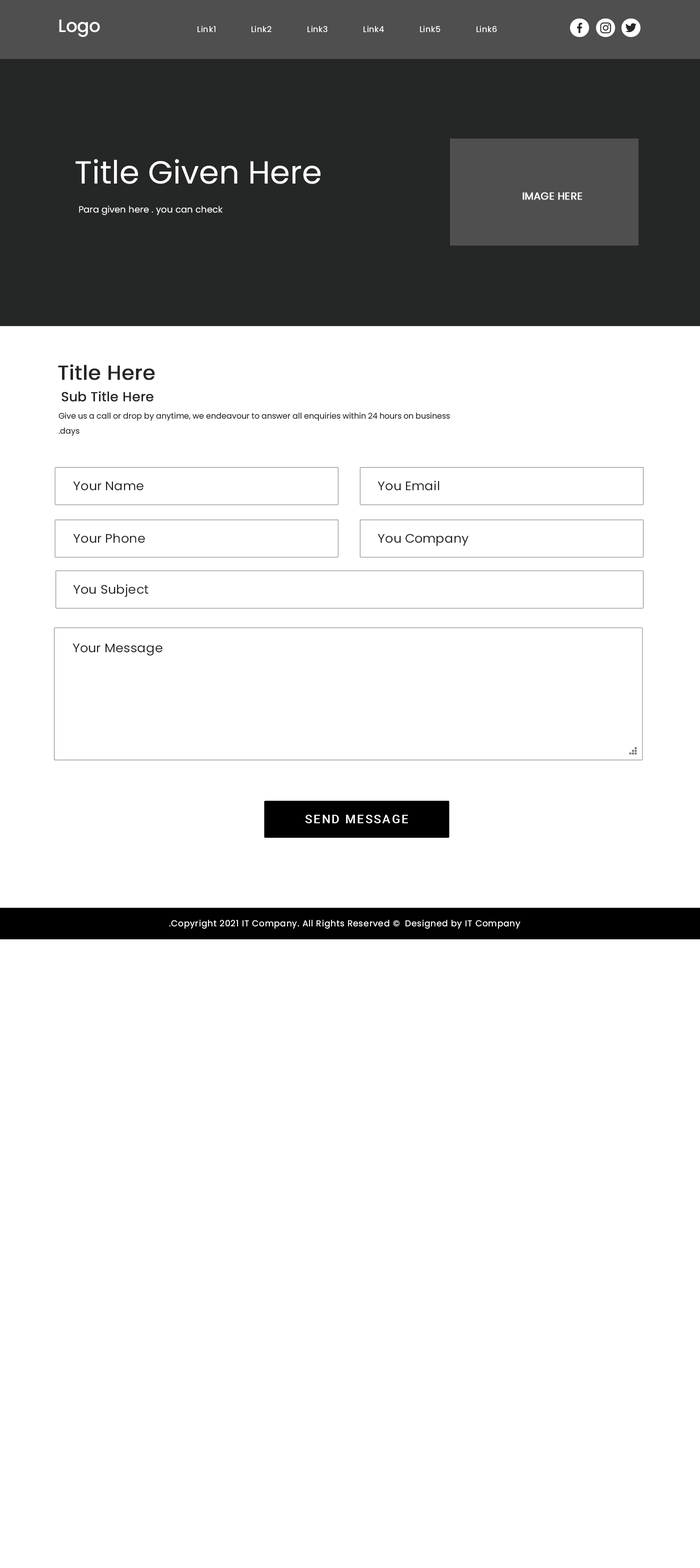
<style>
.page{position:relative;width:700px;height:1568px;background:#ffffff}
.page>*{position:absolute;margin:0}
.t1{font:18px "Poppins-Medium";color:#ffffff}
.t2{font:8px "Poppins-Regular";letter-spacing:0.06em;color:#ffffff}
.t3{font:32px "Poppins-Regular";color:#ffffff}
.t4{font:10.2px "Poppins-Regular";color:#ffffff;font-weight:bold}
.t5{font:9px "Poppins-Regular";color:#ffffff}
.t6{font:20px "Poppins-Regular";color:#252726;font-weight:bold}
.t7{font:13px "Poppins-Regular";color:#252726;font-weight:bold}
.t8{font:8px/15px "Poppins-Regular";color:#252726}
.t9{font:12.3px "Poppins-Regular";color:#222222;scale:1.04 1}
.t10{font:11.9px "Roboto-Medium";letter-spacing:0.1em;color:#ffffff;text-transform:uppercase}
.t11{font:8.5px "Poppins-Regular";letter-spacing:0.05em;color:#ffffff}
</style>
<div class="page">
<p class="t1" style="left:59px;top:20px;width:41px;height:17px">Logo</p>
<p class="t2" style="left:198px;top:26px;width:299px;height:7px">Link1             Link2             Link3             Link4             Link5             Link6</p>
<p class="t3" style="left:76px;top:159px;width:245px;height:25px">Title Given Here</p>
<p class="t4" style="left:523px;top:192px;width:59px;height:8px">IMAGE HERE</p>
<p class="t5" style="left:79px;top:206px;width:144px;height:9px">Para given here . you can check</p>
<p class="t6" style="left:58px;top:364px;width:97px;height:16px">Title Here</p>
<p class="t7" style="left:62px;top:391px;width:92px;height:11px">Sub Title Here</p>
<p class="t8" style="left:59px;top:412px;width:391px;height:24px;text-align:right">Give us a call or drop by anytime, we endeavour to answer all enquiries within 24 hours on business days.</p>
<p class="t9" style="left:73px;top:481px;width:71px;height:10px">Your Name</p>
<p class="t9" style="left:378px;top:481px;width:62px;height:10px">You Email</p>
<p class="t9" style="left:73px;top:533px;width:72px;height:10px">Your Phone</p>
<p class="t9" style="left:378px;top:534px;width:91px;height:12px">You Company</p>
<p class="t9" style="left:73px;top:584px;width:76px;height:13px">You Subject</p>
<p class="t9" style="left:73px;top:643px;width:90px;height:13px">Your Message</p>
<p class="t10" style="left:305px;top:815px;width:103px;height:8px">SEND Message</p>
<p class="t11" style="left:169px;top:920px;width:231px;height:9px">© Copyright 2021 IT Company. All Rights Reserved.</p>
<p class="t11" style="left:406px;top:920px;width:115px;height:9px">Designed by IT Company</p>
</div>
